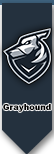
<style>
.page{position:relative;width:54px;height:154px;background:#24313e}
.page>*{position:absolute;margin:0}
.t1{font:8.3px "Arial-Black";letter-spacing:-0.01em;color:#000000}
</style>
<div class="page">
<p class="t1" style="left:3px;top:103px;width:48px;height:9px">Grayhound</p>
</div>
